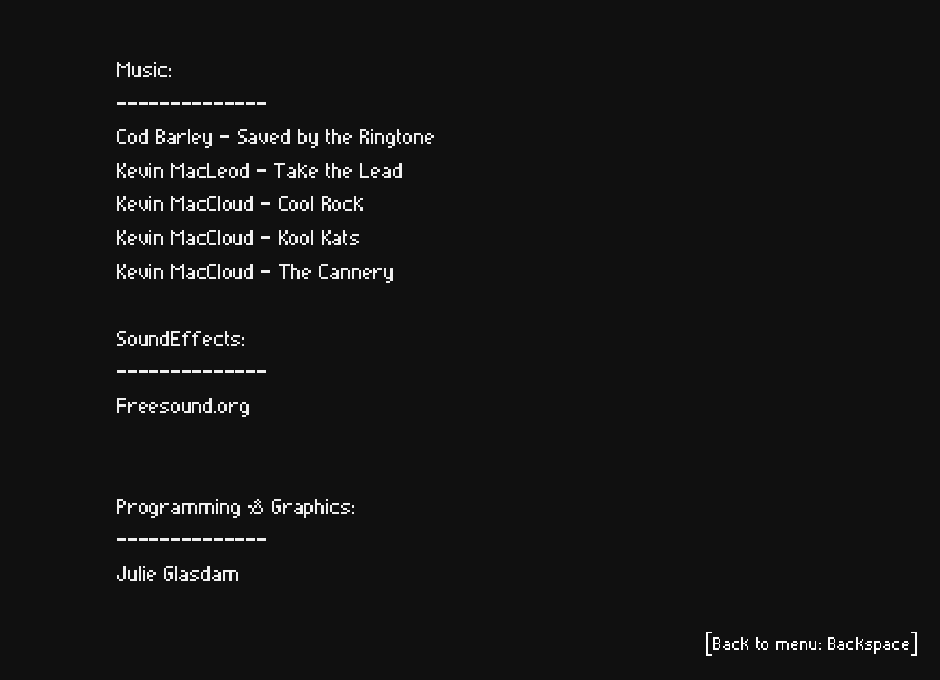
<style>
.page{position:relative;width:940px;height:680px;background:#101010}
.page>*{position:absolute;margin:0}
.t1{font:28px "Pixelade";color:#efefef}
.t2{font:24px "Pixelade";color:#ffffff}
</style>
<div class="page">
<p class="t1" style="left:117px;top:62px;width:317px;height:519px">Music:<br>--------------<br>Cod Barley - Saved by the Ringtone<br>Kevin MacLeod - Take the Lead<br>Kevin MacCloud - Cool Rock<br>Kevin MacCloud - Kool Kats<br>Kevin MacCloud - The Cannery<br><br>SoundEffects:<br>--------------<br>Freesound.org<br><br><br>Programming &amp; Graphics:<br>--------------<br>Julie Glasdam</p>
<p class="t2" style="left:706px;top:632px;width:211px;height:24px">[Back to menu: Backspace]</p>
</div>
